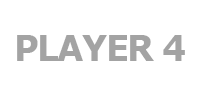
<style>
.page{position:relative;width:200px;height:100px;background:#ffffff}
.page>*{position:absolute;margin:0}
.t1{font:36px "Verdana-Bold";letter-spacing:-0.05em;color:#a3a3a3;scale:0.95 1}
</style>
<div class="page">
<p class="t1" style="left:17px;top:35px;width:168px;height:26px">PLAYER 4</p>
</div>
